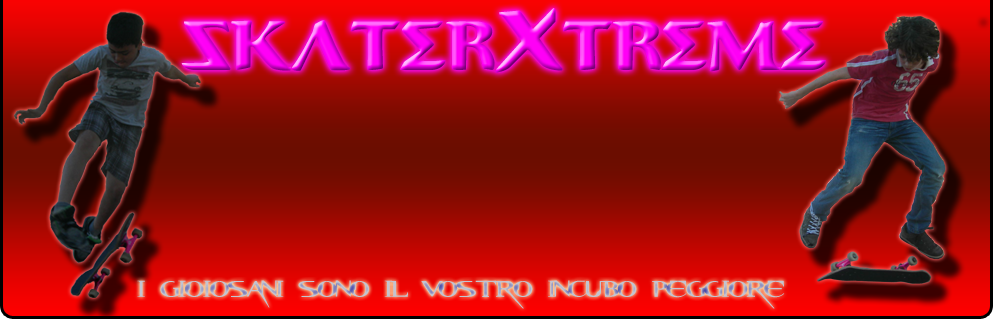
<style>
.page{position:relative;width:993px;height:319px}
.page>*{position:absolute;margin:0}
.t1{font:60px "Aegis";letter-spacing:-0.05em}
.t2{font:72px "Aegis";letter-spacing:-0.05em}
.t3{font:36px "ResidentEvil-Regular";letter-spacing:-0.05em;color:#babbcd}
</style>
<div class="page">
<p class="t1" style="left:181px;top:8px;width:645px;height:65px">SKatEr<span class="t2">x</span>TrEmE</p>
<p class="t3" style="left:137px;top:280px;width:648px;height:29px">I GIOIOSANI SONO IL VOSTRO INCUBO PEGGIORE</p>
</div>
